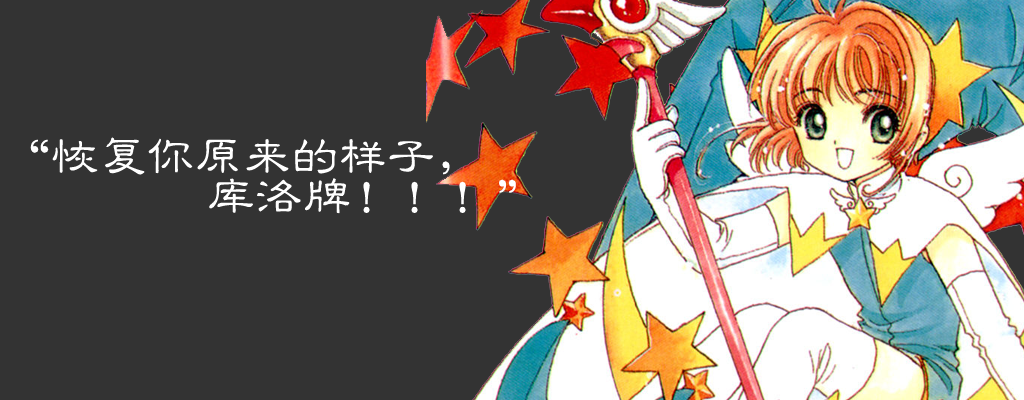
<style>
.page{position:relative;width:1024px;height:400px;background:#333333}
.page>*{position:absolute;margin:0}
.t1{font:48px/40px "GBJenLei-Medium";color:#ffffff}
</style>
<div class="page">
<p class="t1" style="left:30px;top:137px;width:486px;height:77px">“恢复你原来的样子，<br>      库洛牌！！！”</p>
</div>
